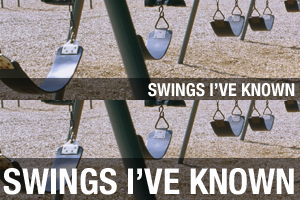
<style>
.page{position:relative;width:300px;height:200px}
.page>*{position:absolute;margin:0}
.t1{font:18px "HelveticaNeue-CondensedBold";color:#ffffff;text-transform:uppercase}
.t2{font:35.8px "HelveticaNeue-CondensedBold";color:#ffffff;text-transform:uppercase}
</style>
<div class="page">
<p class="t1" style="left:148px;top:83px;width:147px;height:14px">SWINGS I’VE KNOWN</p>
<p class="t2" style="left:3px;top:168px;width:291px;height:27px">SWINGS I’VE KNOWN</p>
</div>
